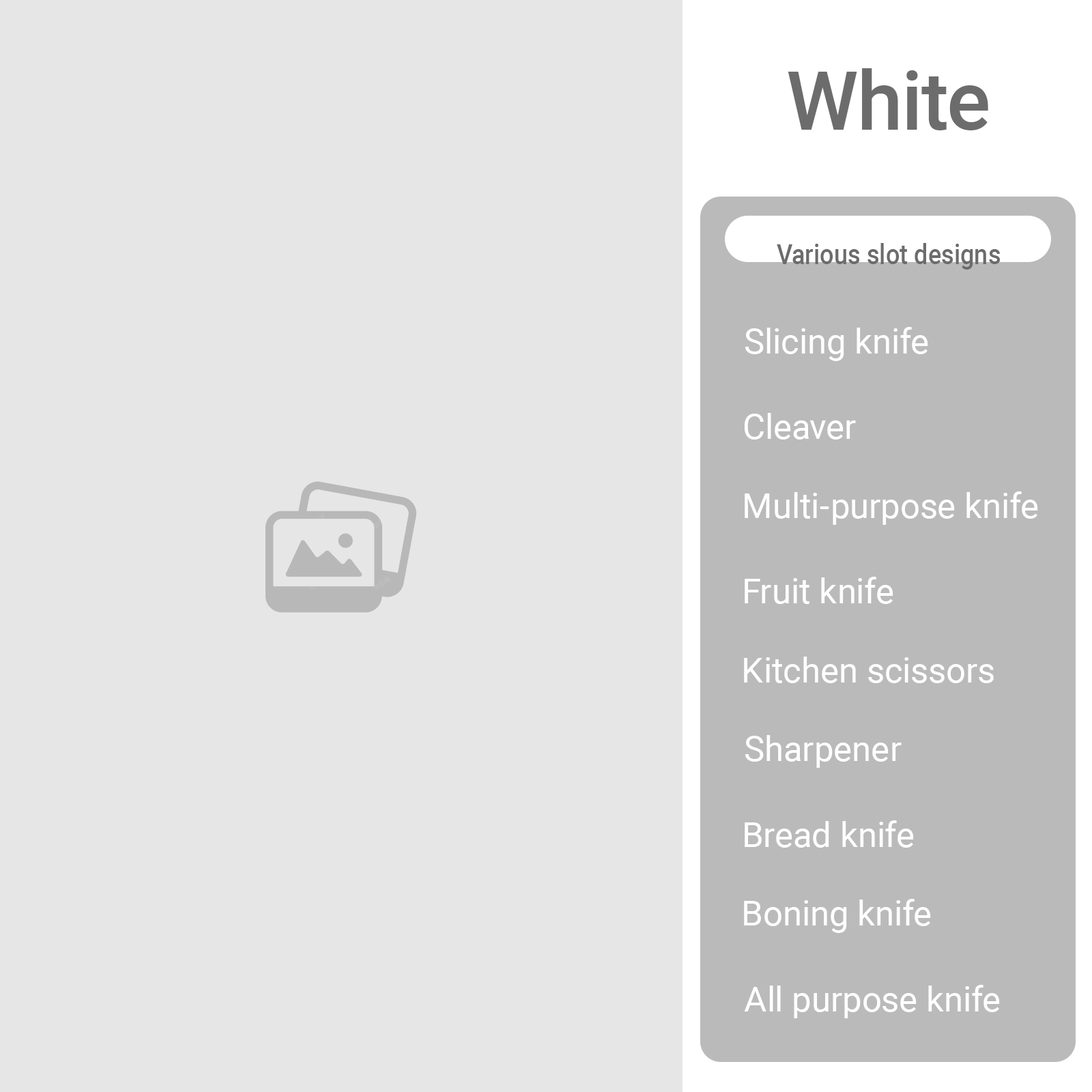
<style>
.page{position:relative;width:1092px;height:1092px;background:#e6e6e6}
.page>*{position:absolute;margin:0}
.t1{font:81.9px "Roboto-Medium";color:#6c6c6c}
.t2{font:27.7px "Roboto-Medium";color:#6c6c6c;scale:0.9 1}
.t3{font:34.9px "Roboto-Regular";color:#ffffff}
</style>
<div class="page">
<p class="t1" style="left:788px;top:68px;width:200px;height:62px">White</p>
<p class="t2" style="left:777px;top:243px;width:223px;height:27px">Various slot designs</p>
<p class="t3" style="left:745px;top:327px;width:183px;height:34px">Slicing knife</p>
<p class="t3" style="left:745px;top:413px;width:111px;height:27px">Cleaver</p>
<p class="t3" style="left:745px;top:491px;width:293px;height:34px">Multi-purpose knife</p>
<p class="t3" style="left:745px;top:577px;width:148px;height:27px">Fruit knife</p>
<p class="t3" style="left:744px;top:657px;width:250px;height:26px">Kitchen scissors</p>
<p class="t3" style="left:745px;top:735px;width:157px;height:33px">Sharpener</p>
<p class="t3" style="left:745px;top:820px;width:169px;height:28px">Bread knife</p>
<p class="t3" style="left:744px;top:899px;width:187px;height:34px">Boning knife</p>
<p class="t3" style="left:744px;top:985px;width:256px;height:33px">All purpose knife</p>
</div>
